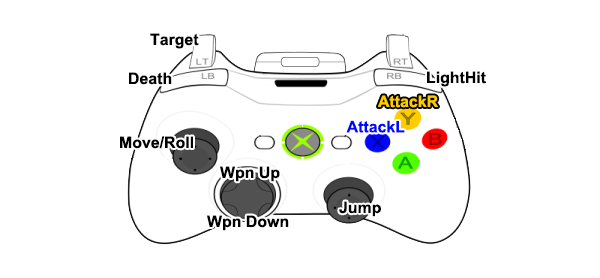
<style>
.page{position:relative;width:600px;height:278px;background:#ffffff}
.page>*{position:absolute;margin:0}
.t1{font:15.9px "Arial-BoldMT";color:#000000}
.t2{font:15.9px "Arial-BoldMT";color:#ffcc00}
.t3{font:15.9px "Arial-BoldMT";color:#0006ff}
</style>
<div class="page">
<p class="t1" style="left:150px;top:33px;width:49px;height:16px">Target</p>
<p class="t1" style="left:129px;top:72px;width:43px;height:13px">Death</p>
<p class="t1" style="left:427px;top:71px;width:59px;height:16px">LightHit</p>
<p class="t2" style="left:378px;top:95px;width:60px;height:13px">AttackR</p>
<p class="t3" style="left:346px;top:120px;width:59px;height:13px">AttackL</p>
<p class="t1" style="left:120px;top:136px;width:73px;height:13px">Move/Roll</p>
<p class="t1" style="left:220px;top:166px;width:60px;height:16px">Wpn Up</p>
<p class="t1" style="left:339px;top:201px;width:42px;height:16px">Jump</p>
<p class="t1" style="left:207px;top:215px;width:82px;height:16px">Wpn Down</p>
</div>
